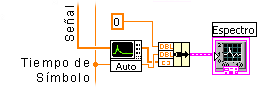
<style>
.page{position:relative;width:268px;height:88px;background:#ffffff}
.page>*{position:absolute;margin:0}
.t1{font:12px "ArialMT";letter-spacing:0.1em;color:#000000}
</style>
<div class="page">
<p class="t1" style="left:64px;top:6px;width:10px;height:35px;rotate:-90deg">Señal</p>
<p class="t1" style="left:21px;top:58px;width:68px;height:24px;text-align:right">Tiempo de Símbolo</p>
</div>
